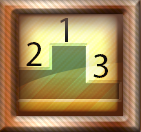
<style>
.page{position:relative;width:141px;height:132px}
.page>*{position:absolute;margin:0}
.t1{font:36px "MyriadHebrew-Regular"}
.t2{font:36px "MyriadHebrew-Regular";color:#000000}
</style>
<div class="page">
<p class="t1" style="left:60px;top:18px;width:8px;height:24px">1</p>
<p class="t2" style="left:26px;top:42px;width:16px;height:24px">2</p>
<p class="t2" style="left:93px;top:54px;width:15px;height:24px">3</p>
</div>
